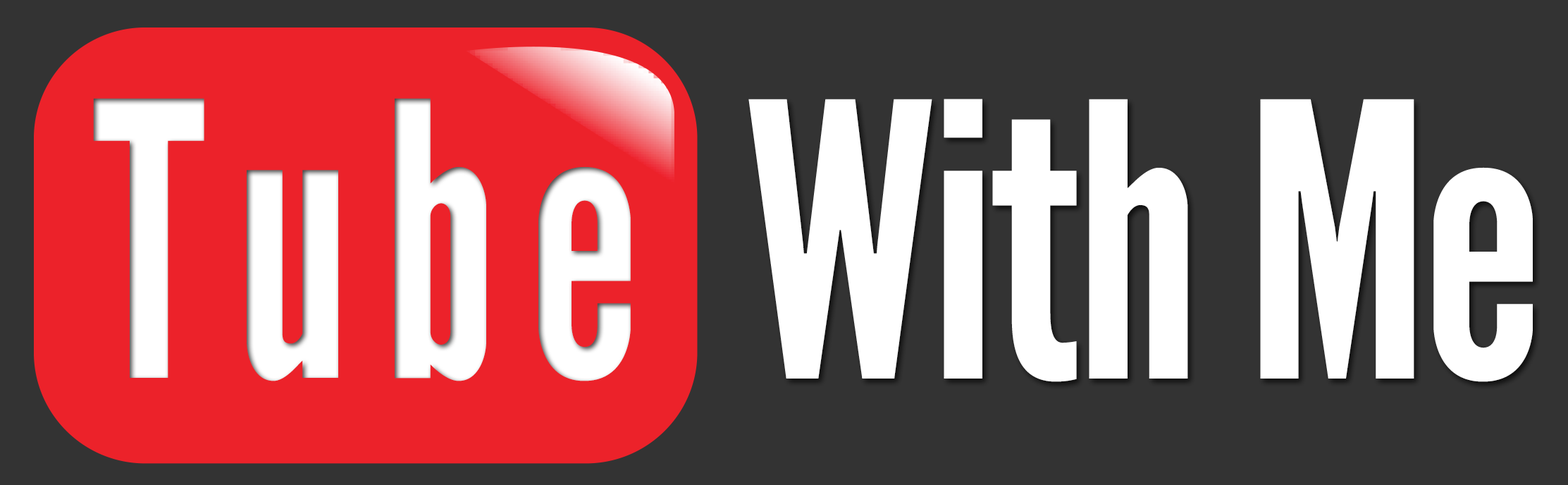
<style>
.page{position:relative;width:1568px;height:485px;background:#333333}
.page>*{position:absolute;margin:0}
.t1{font:379.8px "LeagueGothic";letter-spacing:0.08em;color:#ffffff;scale:0.93 1}
.t2{font:379.8px "LeagueGothic";letter-spacing:-0.02em;color:#ffffff}
</style>
<div class="page">
<p class="t1" style="left:93px;top:98px;width:538px;height:283px">Tube</p>
<p class="t2" style="left:748px;top:99px;width:785px;height:283px">With Me</p>
</div>
